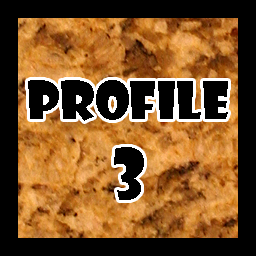
<style>
.page{position:relative;width:256px;height:256px;background:#000000}
.page>*{position:absolute;margin:0}
.t1{font:50px "ShowcardGothic-Reg";color:#000000}
.t2{font:66.7px "ShowcardGothic-Reg";color:#000000}
</style>
<div class="page">
<p class="t1" style="left:28px;top:80px;width:200px;height:120px;text-align:center">Profile<br><span class="t2">3</span></p>
</div>
